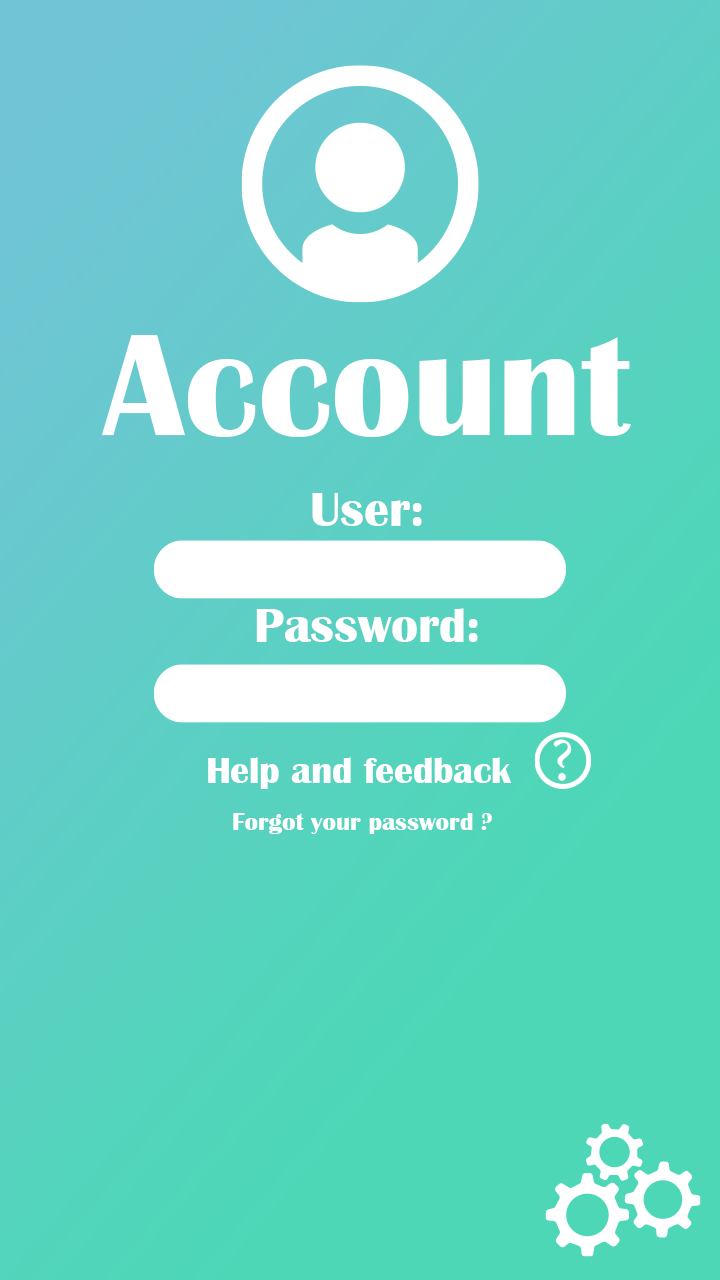
<style>
.page{position:relative;width:720px;height:1280px}
.page>*{position:absolute;margin:0}
.t1{font:150px "BritannicBold";color:#ffffff}
.t2{font:50px "BritannicBold";color:#ffffff}
.t3{font:37.5px "BritannicBold";color:#ffffff}
.t4{font:25px "BritannicBold";color:#ffffff}
</style>
<div class="page">
<p class="t1" style="left:101px;top:335px;width:530px;height:102px">Account</p>
<p class="t2" style="left:312px;top:493px;width:110px;height:33px">User:</p>
<p class="t2" style="left:256px;top:608px;width:222px;height:34px">Password:</p>
<p class="t3" style="left:208px;top:757px;width:304px;height:32px">Help and feedback</p>
<p class="t4" style="left:233px;top:812px;width:259px;height:22px">Forgot your password ?</p>
</div>
